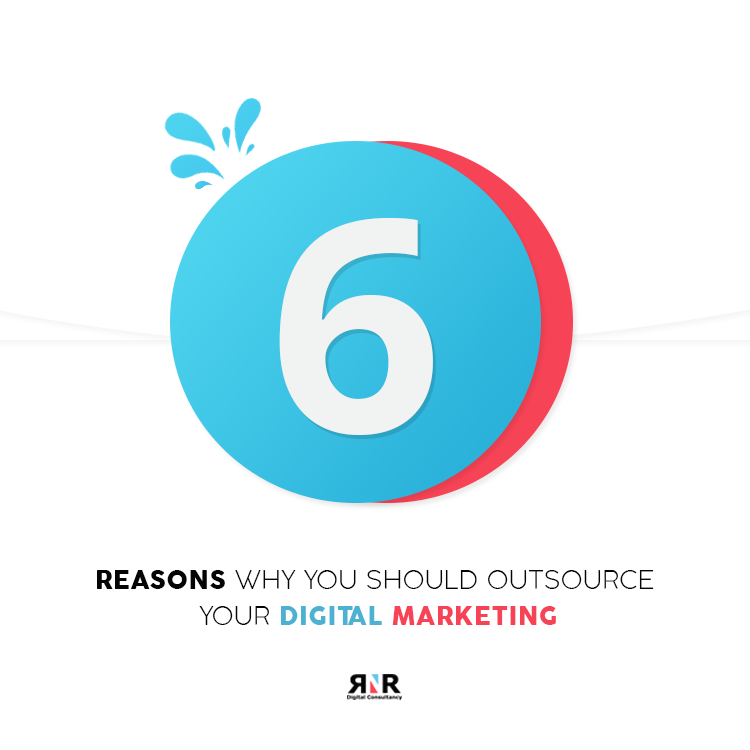
<style>
.page{position:relative;width:750px;height:750px;background:#ffffff}
.page>*{position:absolute;margin:0}
.t1{font:297.4px "OpenSans-Bold";letter-spacing:0.001em;color:#f1f3f2;text-transform:uppercase}
.t2{font:25.2px/35.9px "CocoGothic-Light";letter-spacing:0.021em;color:#050505;text-transform:uppercase}
.t3{font:25.2px/35.9px "CocoGothic-Heavy";letter-spacing:0.021em;color:#050505;text-transform:uppercase}
.t4{font:25.2px/35.9px "CocoGothic-Heavy";letter-spacing:0.021em;color:#4db2d2;text-transform:uppercase}
.t5{font:25.2px/35.9px "CocoGothic-Heavy";letter-spacing:0.021em;color:#f74356;text-transform:uppercase}
</style>
<div class="page">
<p class="t1" style="left:279px;top:217px;width:154px;height:218px">6</p>
<p class="t2" style="left:97px;top:570px;width:557px;height:55px;text-align:center"><span class="t3">Reasons</span> Why You Should Outsource <br>Your <span class="t4">Digital </span><span class="t5">Marketing</span></p>
</div>
